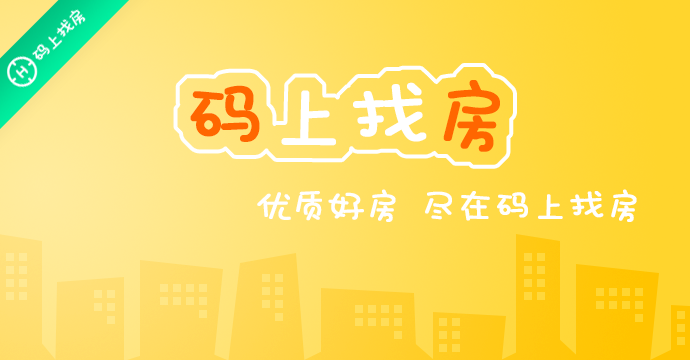
<style>
.page{position:relative;width:690px;height:360px}
.page>*{position:absolute;margin:0}
.t1{font:80px "HYLeMiaoTiJ";color:#ffffff;font-weight:bold}
.t2{font:80px "HYLeMiaoTiJ";color:#ff6600;font-weight:bold}
.t3{font:36px "HYLeMiaoTiJ";color:#ffffff;font-weight:bold}
</style>
<div class="page">
<p class="t1" style="left:190px;top:80px;width:310px;height:72px"><span class="t2">码</span>上找<span class="t2">房</span></p>
<p class="t3" style="left:257px;top:189px;width:380px;height:33px">优质好房 尽在码上找房</p>
</div>
